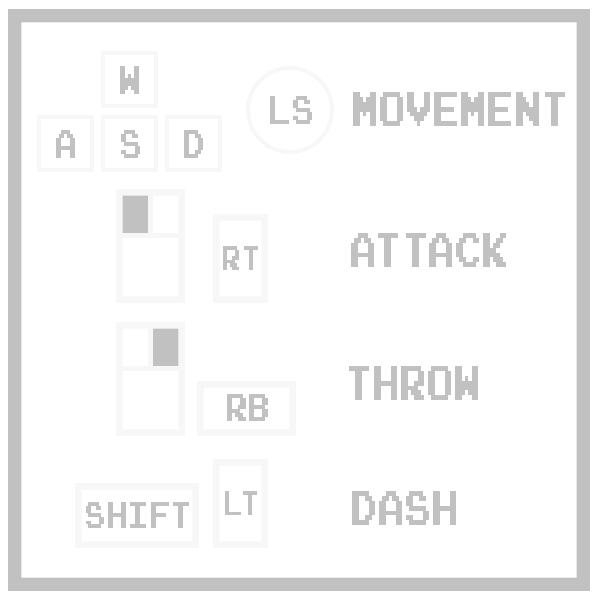
<style>
.page{position:relative;width:600px;height:600px;background:#ffffff}
.page>*{position:absolute;margin:0}
.t1{font:40px "JoystixMonospace-Regular";letter-spacing:0.003em;color:#c1c1c1;scale:0.69 1}
.t2{font:48px "JoystixMonospace-Regular";letter-spacing:0.003em;color:#c1c1c1;scale:0.69 1}
.t3{font:34.3px "JoystixMonospace-Regular";letter-spacing:0.003em;color:#c1c1c1;scale:0.7 1}
.t4{font:39px "JoystixMonospace-Regular";letter-spacing:0.003em;color:#c1c1c1;scale:0.69 1}
.t5{font:37.1px "JoystixMonospace-Regular";letter-spacing:0.003em;color:#c1c1c1;scale:0.7 1}
</style>
<div class="page">
<p class="t1" style="left:120px;top:66px;width:19px;height:28px">W</p>
<p class="t1" style="left:270px;top:96px;width:42px;height:28px">LS</p>
<p class="t2" style="left:353px;top:92px;width:212px;height:34px">MOVEMENT</p>
<p class="t1" style="left:56px;top:130px;width:19px;height:28px">A</p>
<p class="t1" style="left:121px;top:130px;width:19px;height:28px">S</p>
<p class="t1" style="left:184px;top:130px;width:19px;height:28px">D</p>
<p class="t2" style="left:351px;top:233px;width:155px;height:34px">Attack</p>
<p class="t3" style="left:223px;top:246px;width:35px;height:24px">RT</p>
<p class="t2" style="left:349px;top:366px;width:129px;height:34px">throw</p>
<p class="t4" style="left:227px;top:394px;width:41px;height:27px">rb</p>
<p class="t3" style="left:225px;top:491px;width:32px;height:24px">lT</p>
<p class="t2" style="left:352px;top:491px;width:104px;height:34px">dash</p>
<p class="t5" style="left:86px;top:502px;width:103px;height:26px">shift</p>
</div>
